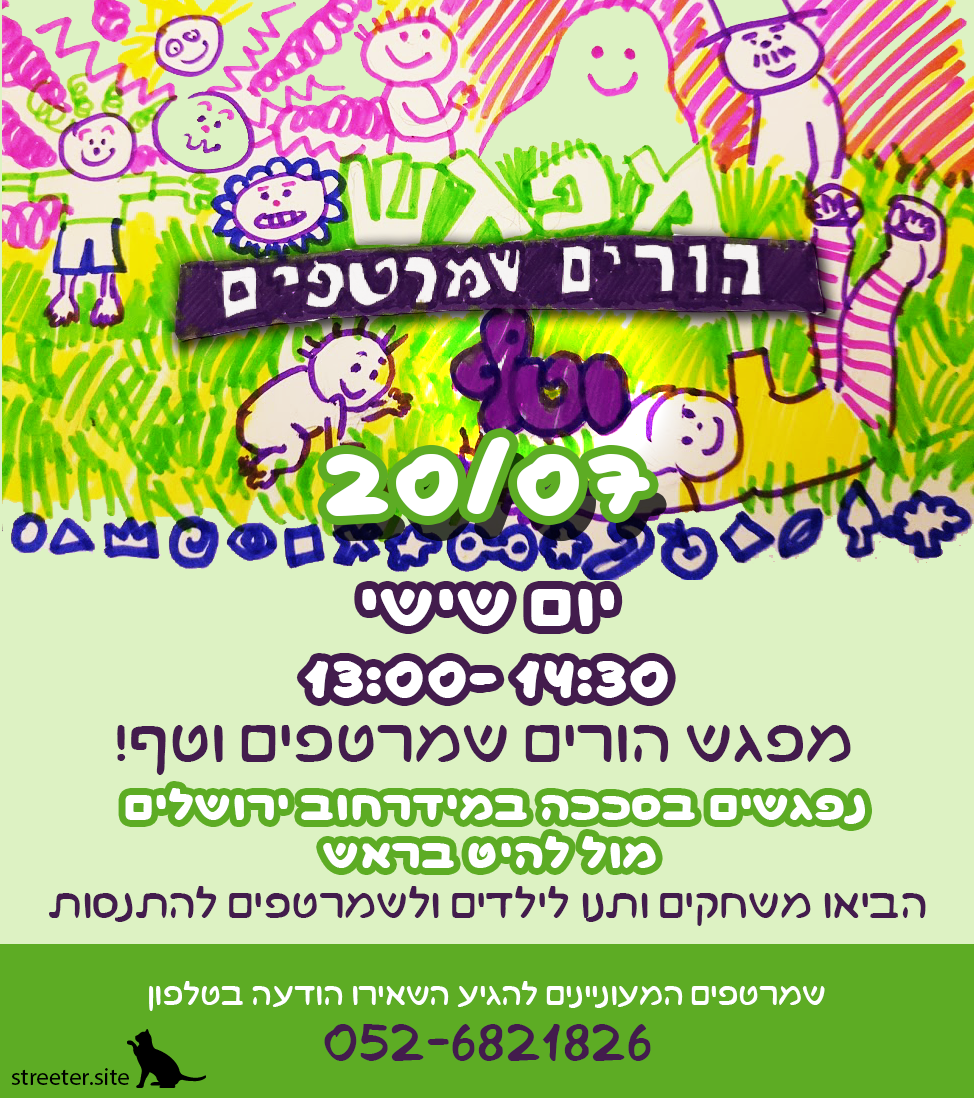
<style>
.page{position:relative;width:974px;height:1098px;background:#ddf2c3}
.page>*{position:absolute;margin:0}
.t1{font:120.3px "ChocoBold";letter-spacing:0.01em;color:#ffffff}
.t2{font:72px/72px "ChocoBold";letter-spacing:0.01em;color:#ffffff}
.t3{font:72px "Choco";letter-spacing:0.01em;color:#431c4d}
.t4{font:48px/48px "ChocoBold";letter-spacing:0.01em;color:#ffffff}
.t5{font:48px "Choco";letter-spacing:0.01em;color:#431c4d}
.t6{font:36px "Choco";letter-spacing:0.01em;color:#ffffff}
.t7{font:24px "MyriadPro-Regular";letter-spacing:0.01em;color:#000000}
.t8{font:24px "Choco";letter-spacing:0.01em;color:#000000}
</style>
<div class="page">
<p class="t1" style="left:326px;top:437px;width:324px;height:79px">20/07</p>
<p class="t2" style="left:304px;top:589px;width:364px;height:109px;text-align:center">ישיש םוי<br>13:00- 14:30</p>
<p class="t3" style="left:117px;top:725px;width:734px;height:50px">!ףטו םיפטרמש םירוה שגפמ</p>
<p class="t4" style="left:125px;top:788px;width:740px;height:80px;text-align:center">םילשורי בוחרדימב הככסב םישגפנ<br>שארב טיהל לומ</p>
<p class="t5" style="left:49px;top:886px;width:877px;height:40px">תוסנתהל םיפטרמשלו םידליל ונתו םיקחשמ ואיבה</p>
<p class="t6" style="left:149px;top:981px;width:676px;height:30px">ןופלטב העדוה וריאשה עיגהל םיניינועמה םיפטרמש</p>
<p class="t3" style="left:324px;top:1024px;width:327px;height:37px">052-6821826</p>
<p class="t7" style="left:11px;top:1068px;width:118px;height:17px">streeter<span class="t8">.</span>site</p>
</div>
